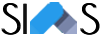
<style>
.page{position:relative;width:102px;height:37px;background:#ffffff}
.page>*{position:absolute;margin:0}
.t1{font:40px "PoiretOne-Regular";color:#000000}
</style>
<div class="page">
<p class="t1" style="left:1px;top:3px;width:24px;height:32px">SI</p>
<p class="t1" style="left:2px;top:3px;width:24px;height:32px">SI</p>
<p class="t1" style="left:3px;top:3px;width:24px;height:32px">SI</p>
<p class="t1" style="left:80px;top:3px;width:18px;height:32px">S</p>
<p class="t1" style="left:81px;top:3px;width:18px;height:32px">S</p>
<p class="t1" style="left:82px;top:3px;width:18px;height:32px">S</p>
</div>
